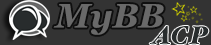
<style>
.page{position:relative;width:211px;height:45px;background:#333333}
.page>*{position:absolute;margin:0}
.t1{font:33.8px "Georgia-BoldItalic";color:#696969}
</style>
<div class="page">
<p class="t1" style="left:53px;top:4px;width:111px;height:31px">MyBB</p>
</div>
